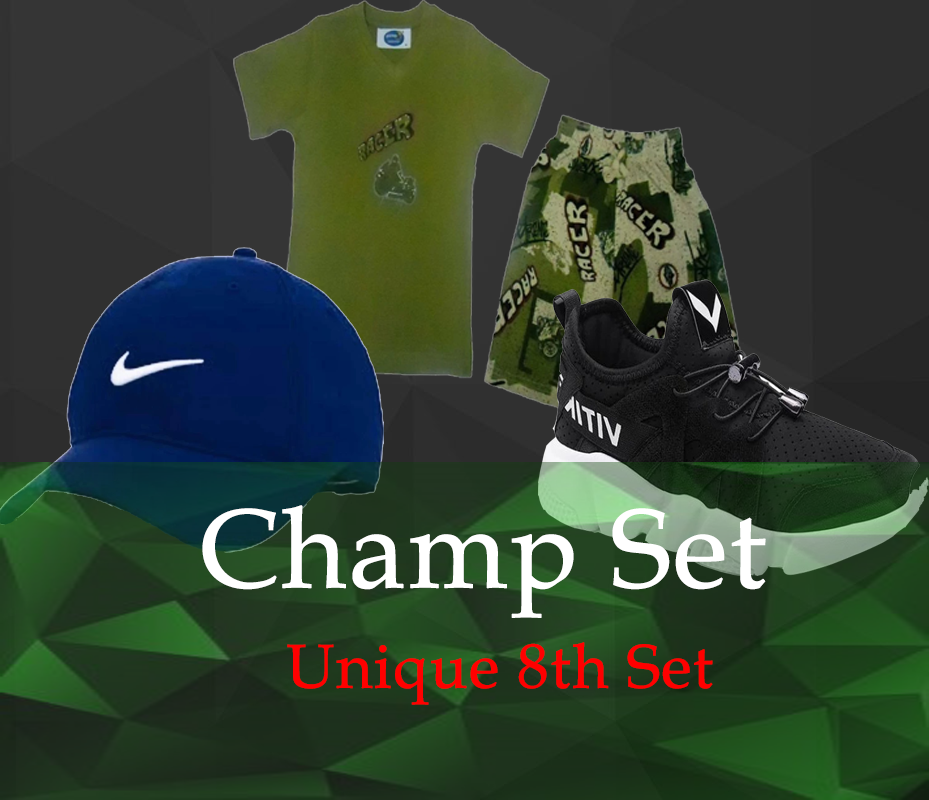
<style>
.page{position:relative;width:929px;height:800px}
.page>*{position:absolute;margin:0}
.t1{font:112px "BookAntiqua";color:#ffffff;font-weight:bold}
.t2{font:62px "BookAntiqua";color:#ff0000;font-weight:bold}
</style>
<div class="page">
<p class="t1" style="left:202px;top:505px;width:564px;height:113px">Champ Set</p>
<p class="t2" style="left:287px;top:642px;width:426px;height:63px">Unique 8th Set</p>
</div>
